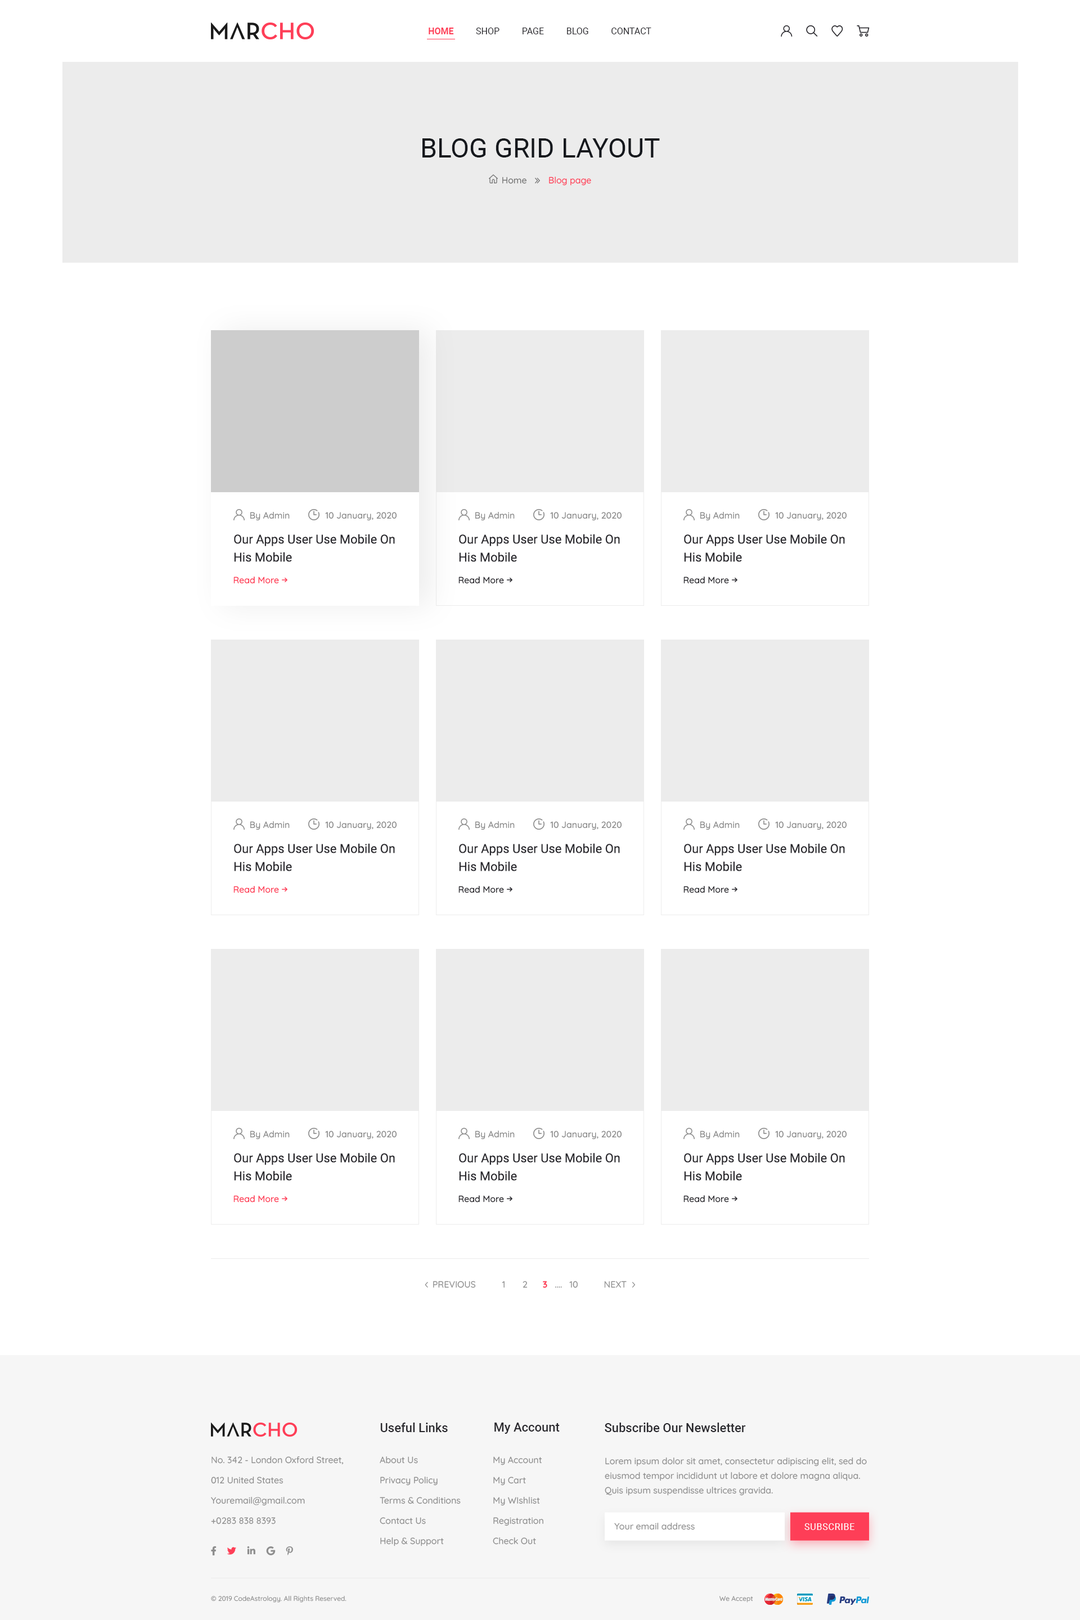
<style>
.page{position:relative;width:1080px;height:1620px;background:#ffffff}
.page>*{position:absolute;margin:0}
.t1{font:9px "Roboto-Regular";color:#29282d}
.t2{font:9px "Roboto-Bold";color:#fe3e57}
.t3{font:27px "Roboto-Regular";color:#15181d}
.t4{font:9px "Quicksand-Medium";color:#727272}
.t5{font:9px "Quicksand-Medium";color:#fe3e57}
.t6{font:9px "Quicksand-Medium";color:#8d8d8d}
.t7{font:12.4px/18px "Roboto-Regular";color:#29282d}
.t8{font:9px "Quicksand-Medium";color:#29282d}
.t9{font:9px "Quicksand-Bold";color:#fe3e57}
.t10{font:12.4px "Roboto-Medium";color:#29282d}
.t11{font:9px/20.2px "Quicksand-Medium";color:#8d8d8d}
.t12{font:9px/14.6px "Quicksand-Medium";color:#8d8d8d}
.t13{font:9px "Roboto-Regular";letter-spacing:0.05em;color:#ffffff;text-transform:uppercase}
.t14{font:6.8px "Quicksand-Medium";color:#8d8d8d}
</style>
<div class="page">
<p class="t1" style="left:429px;top:28px;width:222px;height:6px"><span class="t2">HOME          </span>SHOP          PAGE          BLOG          CONTACT</p>
<p class="t3" style="left:422px;top:138px;width:238px;height:20px">BLOG GRID LAYOUT</p>
<p class="t4" style="left:502px;top:177px;width:24px;height:7px">Home</p>
<p class="t5" style="left:549px;top:177px;width:42px;height:9px">Blog page</p>
<p class="t6" style="left:250px;top:512px;width:40px;height:9px">By Admin</p>
<p class="t6" style="left:325px;top:512px;width:72px;height:9px">10 January, 2020</p>
<p class="t6" style="left:475px;top:512px;width:40px;height:9px">By Admin</p>
<p class="t6" style="left:550px;top:512px;width:72px;height:9px">10 January, 2020</p>
<p class="t6" style="left:700px;top:512px;width:40px;height:9px">By Admin</p>
<p class="t6" style="left:775px;top:512px;width:72px;height:9px">10 January, 2020</p>
<p class="t7" style="left:234px;top:534px;width:161px;height:28px">Our Apps User Use Mobile On His Mobile</p>
<p class="t7" style="left:459px;top:534px;width:161px;height:28px">Our Apps User Use Mobile On His Mobile</p>
<p class="t7" style="left:684px;top:534px;width:161px;height:28px">Our Apps User Use Mobile On His Mobile</p>
<p class="t5" style="left:233px;top:577px;width:46px;height:7px">Read More</p>
<p class="t8" style="left:458px;top:577px;width:46px;height:7px">Read More</p>
<p class="t8" style="left:683px;top:577px;width:46px;height:7px">Read More</p>
<p class="t6" style="left:250px;top:821px;width:40px;height:9px">By Admin</p>
<p class="t6" style="left:325px;top:821px;width:72px;height:9px">10 January, 2020</p>
<p class="t6" style="left:475px;top:821px;width:40px;height:9px">By Admin</p>
<p class="t6" style="left:550px;top:821px;width:72px;height:9px">10 January, 2020</p>
<p class="t6" style="left:700px;top:821px;width:40px;height:9px">By Admin</p>
<p class="t6" style="left:775px;top:821px;width:72px;height:9px">10 January, 2020</p>
<p class="t7" style="left:234px;top:843px;width:161px;height:28px">Our Apps User Use Mobile On His Mobile</p>
<p class="t7" style="left:459px;top:843px;width:161px;height:28px">Our Apps User Use Mobile On His Mobile</p>
<p class="t7" style="left:684px;top:843px;width:161px;height:28px">Our Apps User Use Mobile On His Mobile</p>
<p class="t5" style="left:233px;top:886px;width:46px;height:7px">Read More</p>
<p class="t8" style="left:458px;top:886px;width:46px;height:7px">Read More</p>
<p class="t8" style="left:683px;top:886px;width:46px;height:7px">Read More</p>
<p class="t6" style="left:250px;top:1131px;width:40px;height:9px">By Admin</p>
<p class="t6" style="left:325px;top:1131px;width:72px;height:9px">10 January, 2020</p>
<p class="t6" style="left:475px;top:1131px;width:40px;height:9px">By Admin</p>
<p class="t6" style="left:550px;top:1131px;width:72px;height:9px">10 January, 2020</p>
<p class="t6" style="left:700px;top:1131px;width:40px;height:9px">By Admin</p>
<p class="t6" style="left:775px;top:1131px;width:72px;height:9px">10 January, 2020</p>
<p class="t7" style="left:234px;top:1153px;width:161px;height:28px">Our Apps User Use Mobile On His Mobile</p>
<p class="t7" style="left:459px;top:1153px;width:161px;height:28px">Our Apps User Use Mobile On His Mobile</p>
<p class="t7" style="left:684px;top:1153px;width:161px;height:28px">Our Apps User Use Mobile On His Mobile</p>
<p class="t5" style="left:233px;top:1195px;width:46px;height:8px">Read More</p>
<p class="t8" style="left:458px;top:1195px;width:46px;height:8px">Read More</p>
<p class="t8" style="left:683px;top:1195px;width:46px;height:8px">Read More</p>
<p class="t6" style="left:433px;top:1281px;width:43px;height:7px">PREVIOUS</p>
<p class="t6" style="left:502px;top:1281px;width:76px;height:7px">1 2 <span class="t9">3</span>   ....   10</p>
<p class="t6" style="left:604px;top:1281px;width:23px;height:7px">NEXT</p>
<p class="t10" style="left:380px;top:1423px;width:68px;height:9px">Useful Links</p>
<p class="t10" style="left:494px;top:1423px;width:66px;height:11px">My Account</p>
<p class="t10" style="left:605px;top:1423px;width:141px;height:9px">Subscribe Our Newsletter</p>
<p class="t11" style="left:211px;top:1456px;width:133px;height:68px">No. 342 - London Oxford Street,<br>012 United States<br>Youremail@gmail.com<br>+0283 838 8393</p>
<p class="t11" style="left:380px;top:1456px;width:81px;height:90px">About Us<br>Privacy Policy<br>Terms &amp; Conditions<br>Contact Us<br>Help &amp; Support</p>
<p class="t11" style="left:493px;top:1456px;width:50px;height:89px">My Account<br>My Cart<br>My WIshlist<br>Registration<br>Check Out</p>
<p class="t12" style="left:605px;top:1457px;width:262px;height:39px">Lorem ipsum dolor sit amet, consectetur adipiscing elit, sed do eiusmod tempor incididunt ut labore et dolore magna aliqua. Quis ipsum suspendisse ultrices gravida.</p>
<p class="t6" style="left:614px;top:1523px;width:81px;height:7px">Your email address</p>
<p class="t13" style="left:804px;top:1523px;width:50px;height:7px">Subscribe</p>
<p class="t14" style="left:211px;top:1596px;width:135px;height:7px">© 2019 CodeAstrology. All Rights Reserved.</p>
<p class="t14" style="left:719px;top:1596px;width:34px;height:7px">We Accept</p>
</div>
